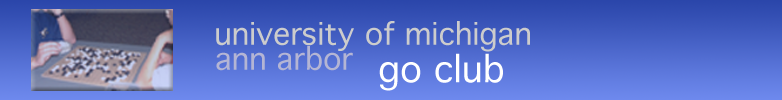
<style>
.page{position:relative;width:782px;height:100px}
.page>*{position:absolute;margin:0}
.t1{font:30px "Geneva";color:#cccccc}
.t2{font:36px "Geneva";color:#ffffff}
</style>
<div class="page">
<p class="t1" style="left:214px;top:18px;width:476px;height:40px">university of michigan</p>
<p class="t1" style="left:215px;top:43px;width:139px;height:40px">ann arbor</p>
<p class="t2" style="left:378px;top:51px;width:222px;height:47px">go club</p>
</div>
